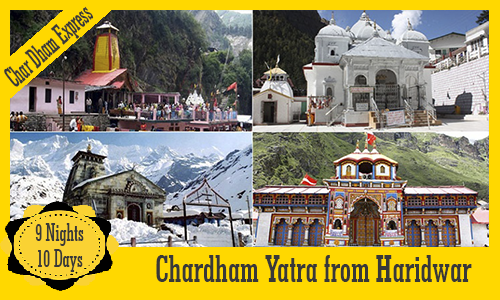
<style>
.page{position:relative;width:500px;height:300px}
.page>*{position:absolute;margin:0}
.t1{font:25.9px/25.9px "GeometricSlab703BT-BoldCond";color:#383838;scale:0.68 1}
.t2{font:40.1px "GeometricSlab703BT-BoldCond";color:#383838;scale:0.75 1}
</style>
<div class="page">
<p class="t1" style="left:35px;top:223px;width:49px;height:49px;text-align:center">9 Nights<br>10 Days</p>
<p class="t2" style="left:156px;top:255px;width:316px;height:27px">Chardham Yatra from Haridwar</p>
</div>
